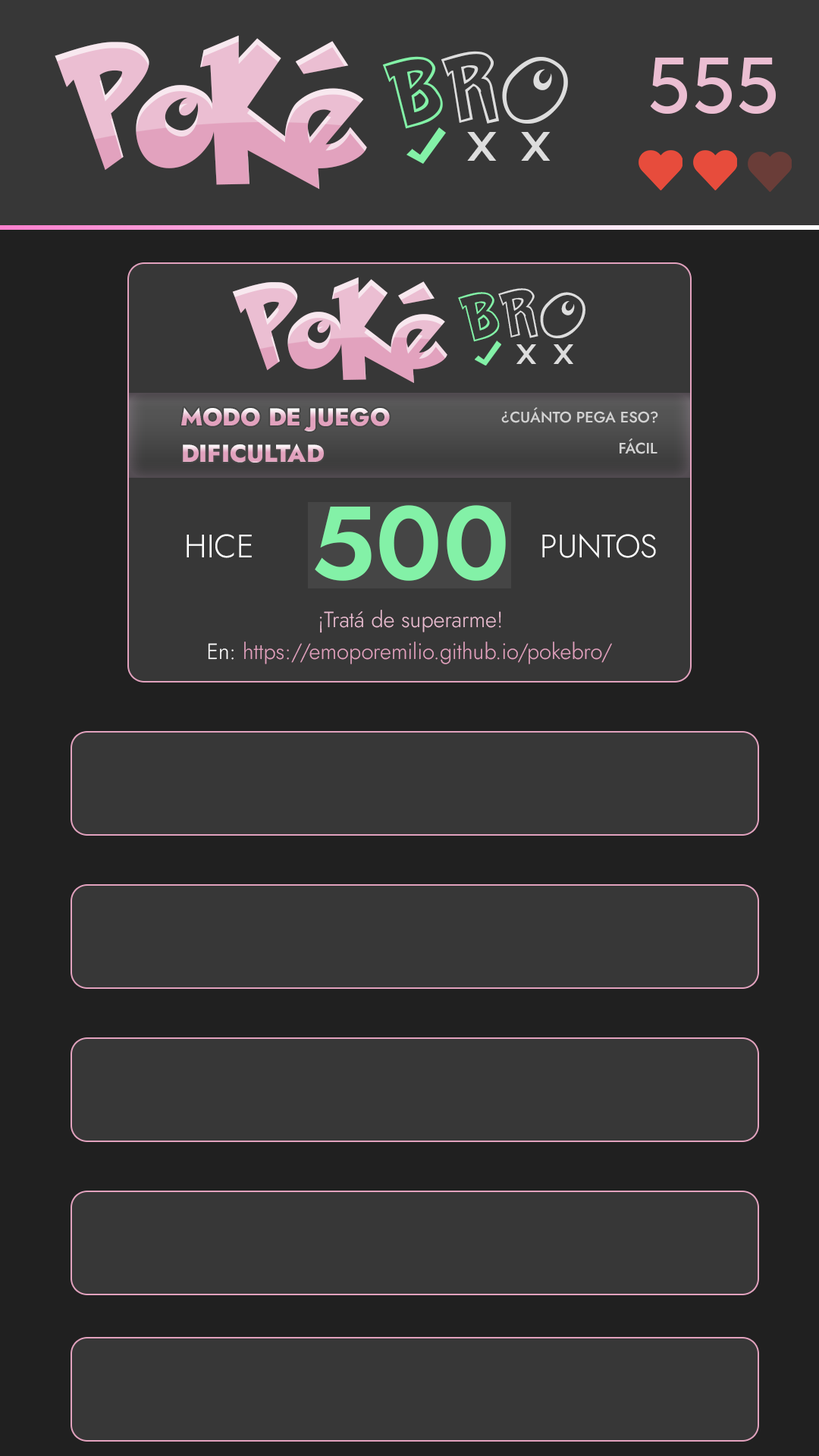
<style>
.page{position:relative;width:819px;height:1456px;background:#373737}
.page>*{position:absolute;margin:0}
.t1{font:141.1px "PokemonSolidNormal"}
.t2{font:78.9px "PokemonHollowNormal";letter-spacing:0.06em;color:#dddddd}
.t3{font:78.9px "PokemonHollowNormal";letter-spacing:0.06em;color:#83f1a7}
.t4{font:78.3px "MuseoSans-500";color:#ebbed2}
.t5{font:41px "AzonixRegular";color:#dddddd}
.t6{font:97.1px "PokemonSolidNormal"}
.t7{font:54.3px "PokemonHollowNormal";letter-spacing:0.06em;color:#83f1a7}
.t8{font:54.3px "PokemonHollowNormal";letter-spacing:0.06em;color:#dddddd}
.t9{font:28.2px "AzonixRegular";color:#dddddd}
.t10{font:24.3px "Jost-ExtraBold"}
.t11{font:15.2px "Jost-Medium";color:#d2d2d2}
.t12{font:103.9px "Jost-SemiBold";color:#83f1a7}
.t13{font:32.6px "Jost-Light";color:#ffffff}
.t14{font:22px "Jost-Light";color:#ebbed2}
.t15{font:22px "Jost-Light";color:#e2a2be}
.t16{font:22px "Jost-Light";color:#ffffff}
</style>
<div class="page">
<p class="t1" style="left:55px;top:35px;width:312px;height:155px">PoKé</p>
<p class="t2" style="left:441px;top:51px;width:58px;height:73px">R</p>
<p class="t3" style="left:382px;top:56px;width:61px;height:73px">B</p>
<p class="t2" style="left:502px;top:57px;width:66px;height:67px">O</p>
<p class="t4" style="left:650px;top:57px;width:126px;height:57px">555</p>
<p class="t5" style="left:467px;top:132px;width:30px;height:29px">x</p>
<p class="t5" style="left:521px;top:132px;width:30px;height:29px">x</p>
<p class="t6" style="left:232px;top:277px;width:215px;height:106px">PoKé</p>
<p class="t7" style="left:458px;top:292px;width:42px;height:50px">B</p>
<p class="t8" style="left:498px;top:288px;width:40px;height:50px">R</p>
<p class="t8" style="left:540px;top:292px;width:45px;height:46px">O</p>
<p class="t9" style="left:516px;top:344px;width:20px;height:20px">x</p>
<p class="t9" style="left:554px;top:344px;width:19px;height:20px">x</p>
<p class="t10" style="left:181px;top:407px;width:209px;height:24px">MODO DE JUEGO</p>
<p class="t11" style="left:501px;top:407px;width:157px;height:16px">¿CUÁNTO PEGA ESO?</p>
<p class="t10" style="left:183px;top:444px;width:141px;height:19px">DIFICULTAD</p>
<p class="t11" style="left:620px;top:438px;width:37px;height:16px">FÁCIL</p>
<p class="t12" style="left:315px;top:505px;width:191px;height:76px">500</p>
<p class="t13" style="left:187px;top:534px;width:65px;height:24px">HICE</p>
<p class="t13" style="left:542px;top:533px;width:114px;height:26px">PUNTOS</p>
<p class="t14" style="left:319px;top:610px;width:182px;height:23px">¡Tratá de superarme!</p>
<p class="t15" style="left:208px;top:642px;width:404px;height:22px"><span class="t16">En: </span>https://emoporemilio.github.io/pokebro/</p>
</div>
